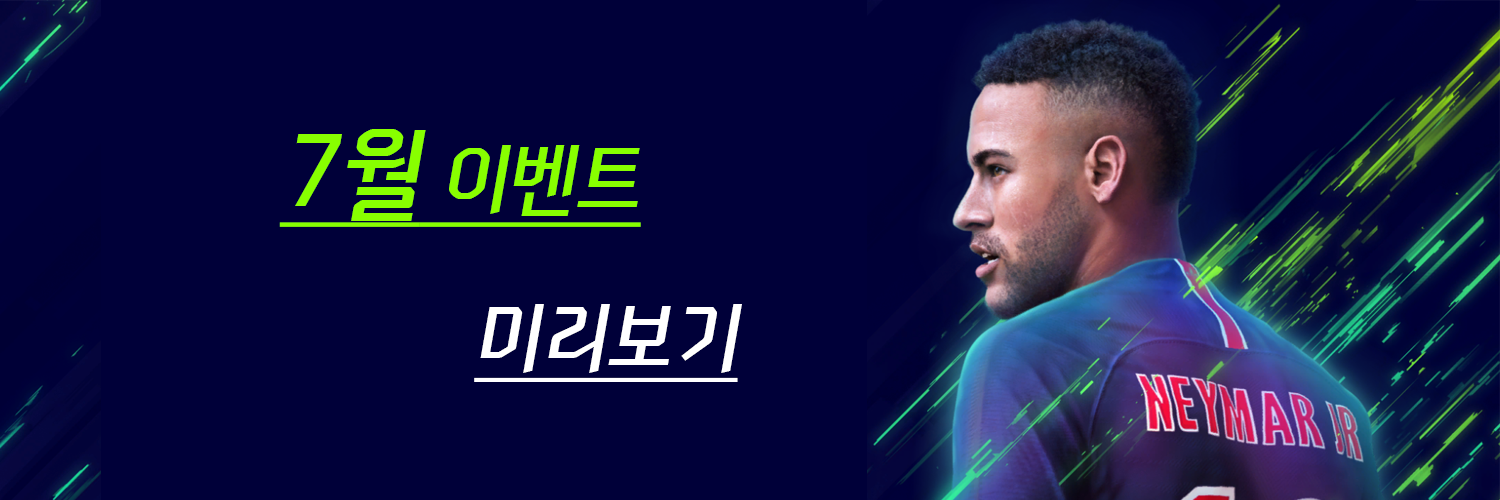
<style>
.page{position:relative;width:1500px;height:500px;background:#000039}
.page>*{position:absolute;margin:0}
.t1{font:80px "NEXONFootballGothicL";color:#ffffff;font-style:italic;text-decoration:underline}
.t2{font:100px "NEXONFootballGothicL";color:#88ff00;font-style:italic;text-decoration:underline}
.t3{font:80px "NEXONFootballGothicL";color:#88ff00;font-style:italic;text-decoration:underline}
</style>
<div class="page">
<p class="t1" style="left:279px;top:129px;width:463px;height:253px;text-align:center"><span class="t2">7월</span><span class="t3"> 이벤트<br>              </span>미리보기</p>
</div>
